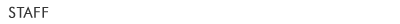
<style>
.page{position:relative;width:400px;height:24px;background:#ffffff}
.page>*{position:absolute;margin:0}
.t1{font:14.7px "FuturaBT-Light";letter-spacing:0.025em;color:#363636;text-transform:uppercase;font-weight:bold}
</style>
<div class="page">
<p class="t1" style="left:8px;top:6px;width:41px;height:12px">STAFF</p>
</div>
